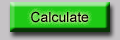
<style>
.page{position:relative;width:120px;height:40px}
.page>*{position:absolute;margin:0}
.t1{font:14px "ArialMT";color:#000000}
</style>
<div class="page">
<p class="t1" style="left:31px;top:11px;width:58px;height:12px">Calculate</p>
</div>
